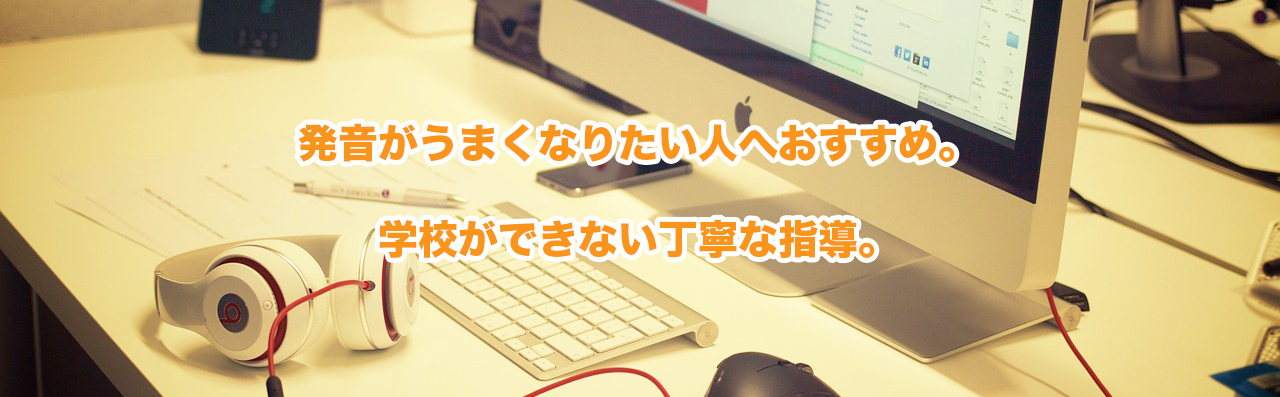
<style>
.page{position:relative;width:1280px;height:397px}
.page>*{position:absolute;margin:0}
.t1{font:40px "HiraKakuStd-W8";color:#fb941a}
</style>
<div class="page">
<p class="t1" style="left:298px;top:123px;width:657px;height:136px;text-align:center">発音がうまくなりたい人へおすすめ。<br><br>学校ができない丁寧な指導。</p>
</div>
